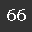
<style>
.page{position:relative;width:32px;height:32px;background:#333333}
.page>*{position:absolute;margin:0}
.t1{font:17.8px "MyriadPro-Regular";color:#ffffff;scale:1.12 1}
</style>
<div class="page">
<p class="t1" style="left:7px;top:9px;width:19px;height:12px">66=5</p>
</div>
